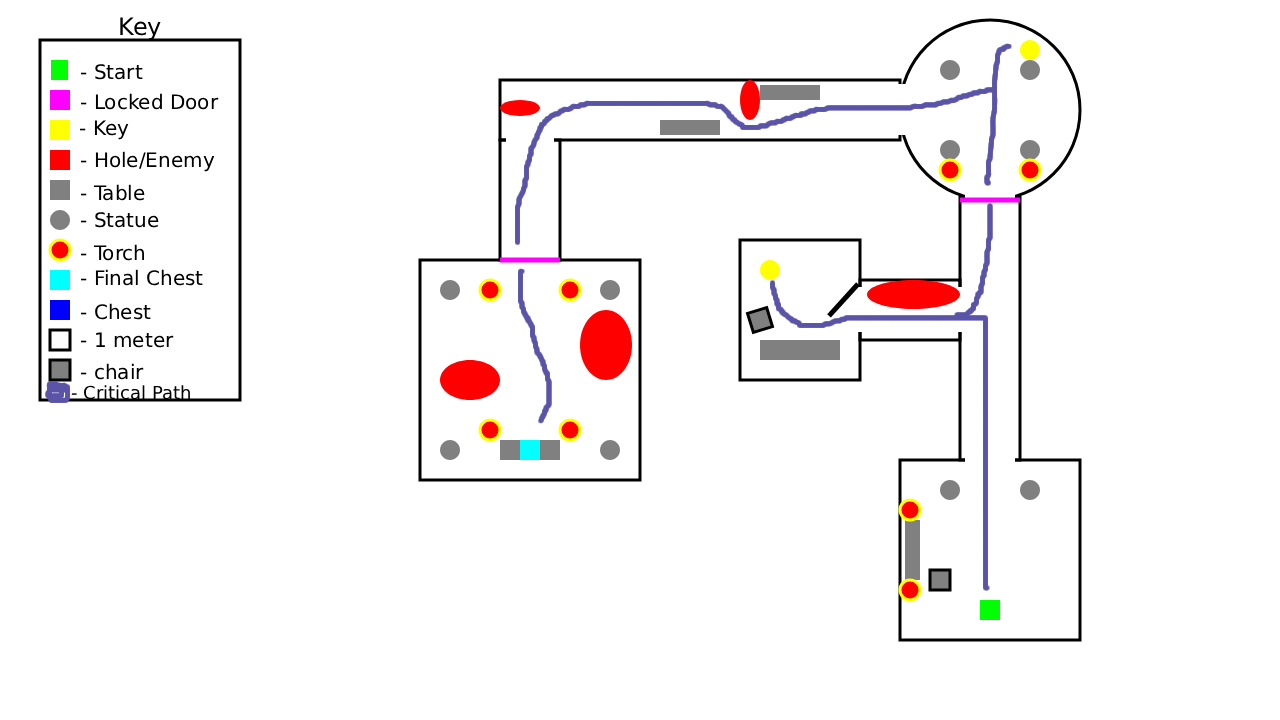
<style>
.page{position:relative;width:1280px;height:720px;background:#ffffff}
.page>*{position:absolute;margin:0}
.t1{font:24px "DejaVuSans";color:#000000}
.t2{font:20px "DejaVuSans";color:#000000}
.t3{font:18px "DejaVuSans";color:#000000}
</style>
<div class="page">
<p class="t1" style="left:120px;top:17px;width:41px;height:23px">Key</p>
<p class="t2" style="left:80px;top:64px;width:63px;height:16px">- Start</p>
<p class="t2" style="left:80px;top:93px;width:139px;height:17px">- Locked Door</p>
<p class="t2" style="left:79px;top:120px;width:50px;height:20px">- Key</p>
<p class="t2" style="left:80px;top:151px;width:135px;height:21px">- Hole/Enemy</p>
<p class="t2" style="left:80px;top:184px;width:65px;height:17px">- Table</p>
<p class="t2" style="left:80px;top:212px;width:79px;height:16px">- Statue</p>
<p class="t2" style="left:80px;top:244px;width:64px;height:17px">- Torch</p>
<p class="t2" style="left:80px;top:269px;width:123px;height:17px">- Final Chest</p>
<p class="t2" style="left:80px;top:303px;width:71px;height:17px">- Chest</p>
<p class="t2" style="left:80px;top:332px;width:94px;height:16px">- 1 meter</p>
<p class="t2" style="left:80px;top:363px;width:64px;height:17px">- chair</p>
<p class="t3" style="left:71px;top:385px;width:119px;height:15px">- Critical Path</p>
</div>
